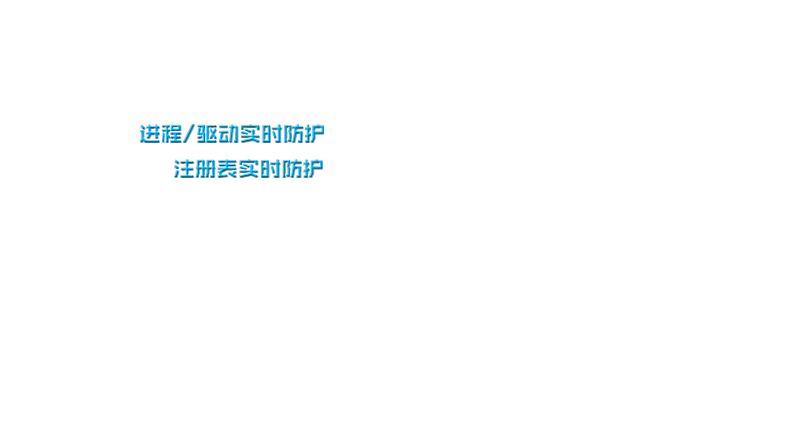
<style>
.page{position:relative;width:800px;height:440px;background:#ffffff}
.page>*{position:absolute;margin:0}
.t1{font:21.6px "ZHSRXT--GBK1-0"}
</style>
<div class="page">
<p class="t1" style="left:140px;top:124px;width:184px;height:19px">进程/驱动实时防护</p>
<p class="t1" style="left:174px;top:159px;width:149px;height:19px">注册表实时防护</p>
</div>
